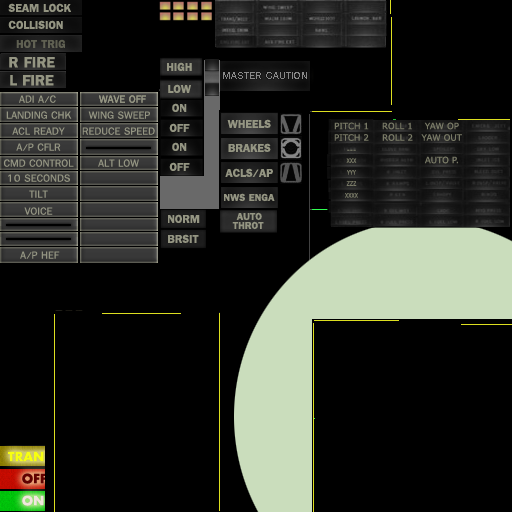
<style>
.page{position:relative;width:512px;height:512px;background:#000000}
.page>*{position:absolute;margin:0}
.t1{font:18px "FreesiaUPCBold";color:#949582;font-variant:small-caps}
.t2{font:18px "FreesiaUPCBold";color:#5f6052;font-variant:small-caps}
.t3{font:24px "FreesiaUPCBold";color:#949582;font-variant:small-caps}
.t4{font:16px "FreesiaUPC";color:#949582;font-variant:small-caps}
.t5{font:8.8px "Verdana";color:#787965;font-variant:small-caps}
.t6{font:9px "Verdana";color:#787965;font-variant:small-caps;scale:0.75 1}
.t7{font:16px "FreesiaUPCBold";color:#949582;font-variant:small-caps}
</style>
<div class="page">
<p class="t1" style="left:8px;top:3px;width:63px;height:9px">SEAM LOCK</p>
<p class="t1" style="left:8px;top:20px;width:55px;height:9px">COLLISION</p>
<p class="t2" style="left:16px;top:39px;width:49px;height:9px">HOT TRIG</p>
<p class="t3" style="left:9px;top:57px;width:46px;height:11px">R FIRE</p>
<p class="t1" style="left:167px;top:62px;width:25px;height:9px">HIGH</p>
<p class="t3" style="left:10px;top:75px;width:44px;height:11px">L FIRE</p>
<p class="t1" style="left:168px;top:84px;width:23px;height:9px">LOW</p>
<p class="t4" style="left:19px;top:95px;width:37px;height:8px">ADI A/C</p>
<p class="t4" style="left:99px;top:95px;width:47px;height:8px">WAVE OFF</p>
<p class="t4" style="left:99px;top:95px;width:47px;height:8px">WAVE OFF</p>
<p class="t4" style="left:6px;top:111px;width:66px;height:8px">LANDING CHK</p>
<p class="t4" style="left:88px;top:111px;width:62px;height:8px">WING SWEEP</p>
<p class="t1" style="left:172px;top:103px;width:15px;height:9px">ON</p>
<p class="t1" style="left:169px;top:123px;width:21px;height:9px">OFF</p>
<p class="t1" style="left:227px;top:119px;width:44px;height:9px">WHEELS</p>
<p class="t5" style="left:334px;top:122px;width:35px;height:8px">PITCH 1</p>
<p class="t5" style="left:382px;top:122px;width:30px;height:8px">ROLL 1</p>
<p class="t5" style="left:424px;top:122px;width:35px;height:8px">YAW OP</p>
<p class="t4" style="left:12px;top:127px;width:53px;height:8px">ACL READY</p>
<p class="t4" style="left:82px;top:127px;width:73px;height:8px">REDUCE SPEED</p>
<p class="t5" style="left:334px;top:134px;width:35px;height:7px">PITCH 2</p>
<p class="t5" style="left:382px;top:134px;width:31px;height:7px">ROLL 2</p>
<p class="t5" style="left:421px;top:134px;width:41px;height:7px">YAW OUT</p>
<p class="t4" style="left:16px;top:143px;width:45px;height:8px">A/P CFLR</p>
<p class="t1" style="left:172px;top:142px;width:15px;height:9px">ON</p>
<p class="t1" style="left:228px;top:143px;width:43px;height:9px">BRAKES</p>
<p class="t6" style="left:347px;top:149px;width:9px;height:2px">---</p>
<p class="t4" style="left:3px;top:159px;width:71px;height:8px">CMD CONTROL</p>
<p class="t4" style="left:98px;top:159px;width:41px;height:8px">ALT LOW</p>
<p class="t6" style="left:346px;top:158px;width:11px;height:5px">xxx</p>
<p class="t5" style="left:425px;top:156px;width:33px;height:8px">AUTO P.</p>
<p class="t4" style="left:8px;top:174px;width:62px;height:8px">10 SECONDS</p>
<p class="t1" style="left:169px;top:162px;width:21px;height:9px">OFF</p>
<p class="t1" style="left:225px;top:168px;width:48px;height:9px">ACLS/AP</p>
<p class="t6" style="left:347px;top:170px;width:9px;height:5px">yyy</p>
<p class="t6" style="left:346px;top:181px;width:11px;height:5px">zzz</p>
<p class="t4" style="left:29px;top:190px;width:19px;height:8px">TILT</p>
<p class="t7" style="left:224px;top:193px;width:51px;height:9px">NWS ENGA</p>
<p class="t6" style="left:345px;top:193px;width:13px;height:5px">xxxx</p>
<p class="t4" style="left:24px;top:207px;width:29px;height:8px">VOICE</p>
<p class="t1" style="left:168px;top:214px;width:32px;height:9px">NORM</p>
<p class="t7" style="left:232px;top:221px;width:32px;height:9px">THROT</p>
<p class="t7" style="left:236px;top:212px;width:26px;height:9px">AUTO</p>
<p class="t1" style="left:168px;top:234px;width:31px;height:9px">BRSIT</p>
<p class="t4" style="left:20px;top:251px;width:40px;height:8px">A/P HEF</p>
</div>
